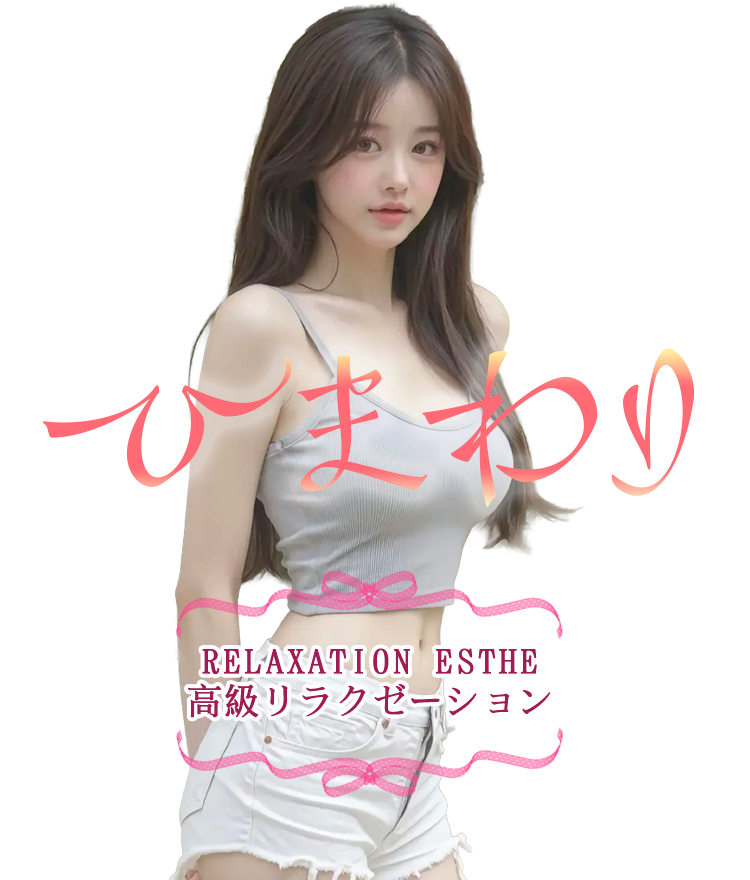
<style>
.page{position:relative;width:750px;height:880px;background:#ffffff}
.page>*{position:absolute;margin:0}
.t1{font:164.8px "Kizashi-Regular";color:#ff6a75}
.t2{font:35.4px "SimSong-Bold";letter-spacing:0.1em;color:#a11c54}
.t3{font:36.8px "SimSong-Bold";color:#a11c54}
</style>
<div class="page">
<p class="t1" style="left:42px;top:348px;width:653px;height:159px">ひまわり</p>
<p class="t2" style="left:202px;top:648px;width:335px;height:27px">RELAXATION ESTHE</p>
<p class="t3" style="left:188px;top:683px;width:363px;height:35px">高級リラクゼーション</p>
</div>
